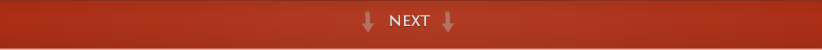
<style>
.page{position:relative;width:822px;height:50px}
.page>*{position:absolute;margin:0}
.t1{font:20.2px "FontinSans-SmallCaps";letter-spacing:-0.01em;color:#e0e0e0}
</style>
<div class="page">
<p class="t1" style="left:390px;top:15px;width:40px;height:11px">next</p>
</div>
